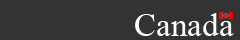
<style>
.page{position:relative;width:240px;height:40px;background:#333333}
.page>*{position:absolute;margin:0}
.t1{font:33.4px "TimesNewRomanPSMT";color:#ffffff}
</style>
<div class="page">
<p class="t1" style="left:135px;top:13px;width:99px;height:23px">Canada</p>
</div>
